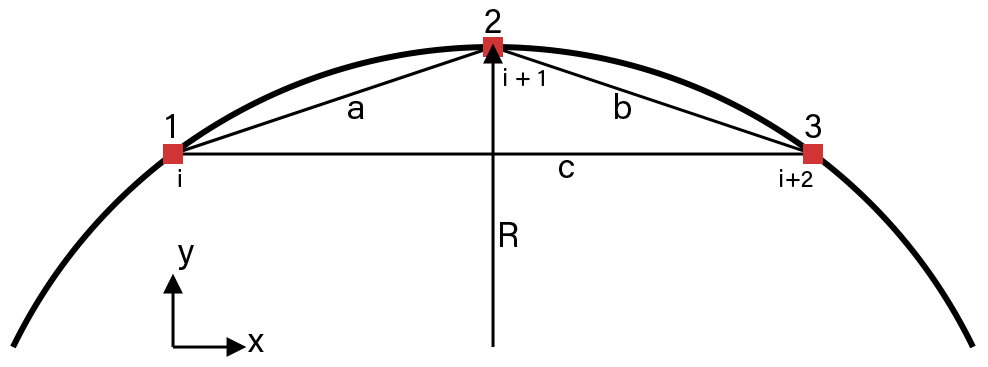
<style>
.page{position:relative;width:988px;height:367px;background:#ffffff}
.page>*{position:absolute;margin:0}
.t1{font:35px "AcuminPro-Regular";color:#000000}
.t2{font:24px "AcuminPro-Regular";color:#000000}
</style>
<div class="page">
<p class="t1" style="left:485px;top:9px;width:16px;height:24px">2</p>
<p class="t2" style="left:504px;top:68px;width:40px;height:18px">i + 1</p>
<p class="t1" style="left:348px;top:101px;width:16px;height:18px">a</p>
<p class="t1" style="left:615px;top:93px;width:16px;height:26px">b</p>
<p class="t1" style="left:166px;top:114px;width:8px;height:24px">1</p>
<p class="t1" style="left:805px;top:114px;width:16px;height:24px">3</p>
<p class="t1" style="left:559px;top:160px;width:15px;height:18px">c</p>
<p class="t2" style="left:178px;top:169px;width:3px;height:18px">i</p>
<p class="t2" style="left:780px;top:169px;width:33px;height:18px">i+2</p>
<p class="t1" style="left:500px;top:222px;width:18px;height:25px">R</p>
<p class="t1" style="left:178px;top:245px;width:16px;height:25px">y</p>
<p class="t1" style="left:248px;top:334px;width:16px;height:18px">x</p>
</div>
